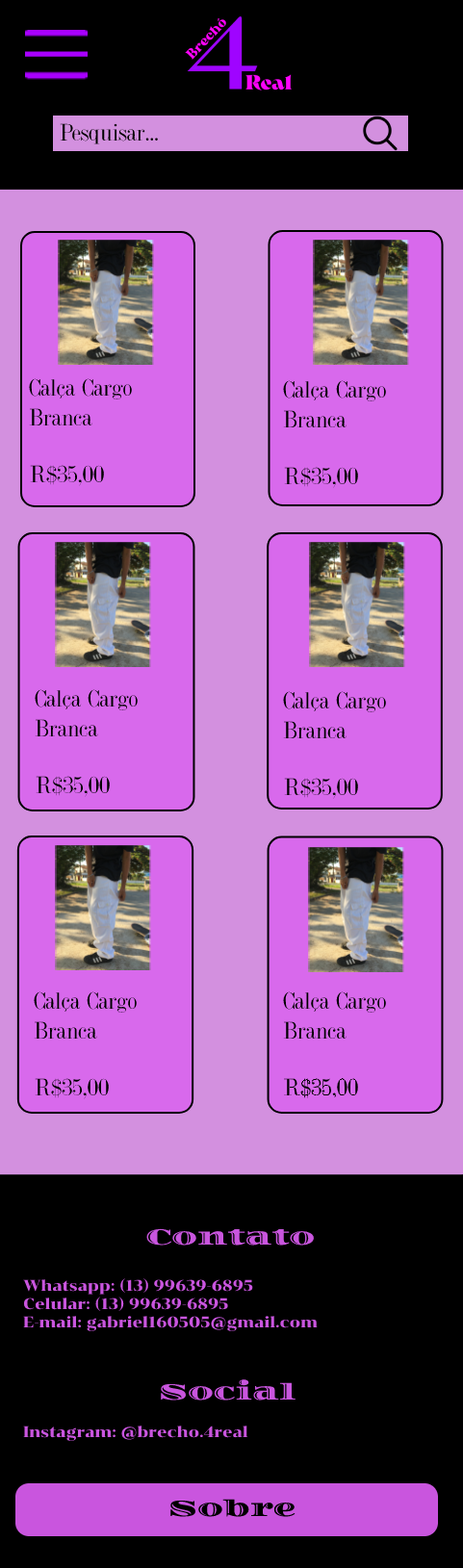
<style>
.page{position:relative;width:463px;height:1568px;background:#000000}
.page>*{position:absolute;margin:0}
.t1{font:25px "DubielPlain";color:#000000}
.t2{font:23.1px "Diplomata-Regular";color:#c955de}
.t3{font:15.4px "Chonburi-Regular";color:#c955de}
.t4{font:23.1px "Diplomata-Regular";color:#000000}
</style>
<div class="page">
<p class="t1" style="left:60px;top:123px;width:98px;height:21px">Pesquisar...</p>
<p class="t1" style="left:29px;top:378px;width:103px;height:47px">Calça Cargo Branca</p>
<p class="t1" style="left:283px;top:380px;width:103px;height:48px">Calça Cargo Branca</p>
<p class="t1" style="left:30px;top:465px;width:74px;height:21px">R$35,00</p>
<p class="t1" style="left:284px;top:467px;width:74px;height:21px">R$35,00</p>
<p class="t1" style="left:35px;top:689px;width:103px;height:47px">Calça Cargo Branca</p>
<p class="t1" style="left:283px;top:691px;width:103px;height:47px">Calça Cargo Branca</p>
<p class="t1" style="left:36px;top:776px;width:74px;height:21px">R$35,00</p>
<p class="t1" style="left:284px;top:778px;width:74px;height:21px">R$35,00</p>
<p class="t1" style="left:34px;top:991px;width:103px;height:48px">Calça Cargo Branca</p>
<p class="t1" style="left:283px;top:991px;width:103px;height:48px">Calça Cargo Branca</p>
<p class="t1" style="left:35px;top:1078px;width:74px;height:21px">R$35,00</p>
<p class="t1" style="left:284px;top:1078px;width:74px;height:20px">R$35,00</p>
<p class="t2" style="left:146px;top:1228px;width:168px;height:18px">Contato</p>
<p class="t3" style="left:23px;top:1278px;width:295px;height:53px">Whatsapp: (13) 99639-6895<br>Celular: (13) 99639-6895<br>E-mail: gabriel160505@gmail.com</p>
<p class="t2" style="left:161px;top:1379px;width:135px;height:22px">Social</p>
<p class="t3" style="left:23px;top:1426px;width:225px;height:15px">Instagram: @brecho.4real</p>
<p class="t4" style="left:170px;top:1499px;width:126px;height:18px">Sobre</p>
</div>
